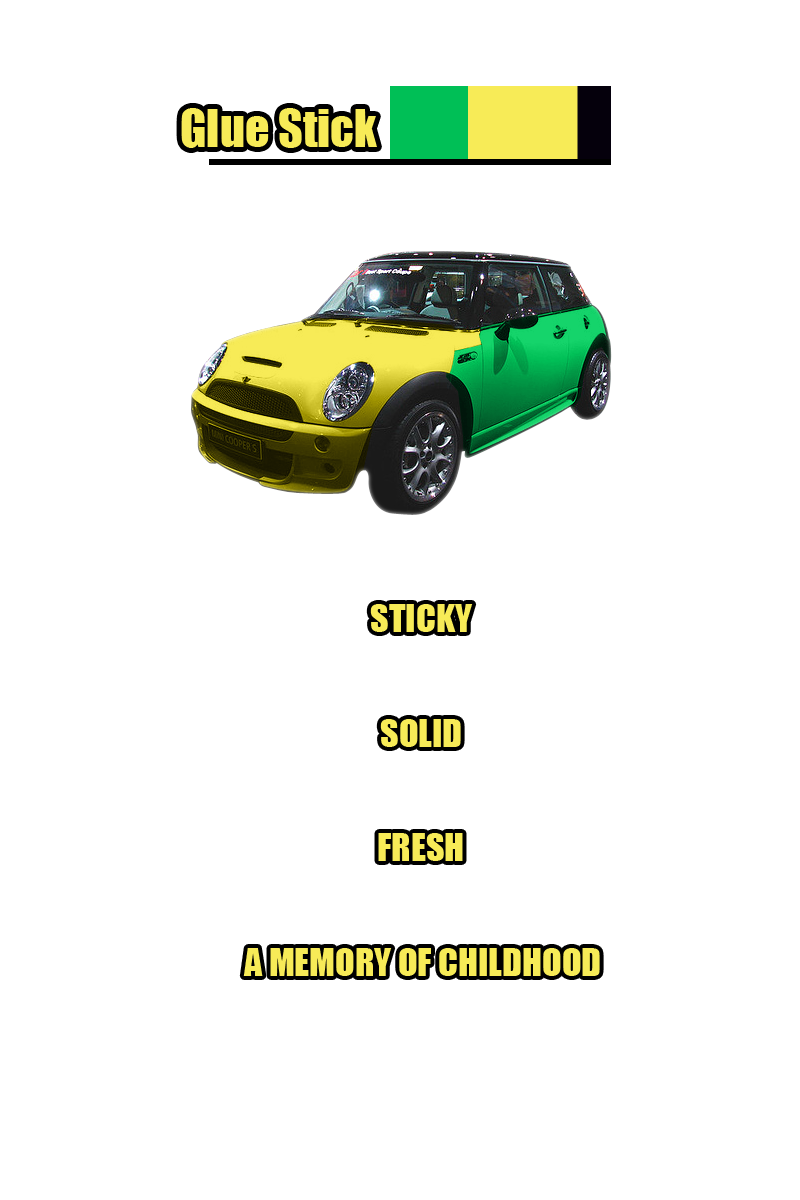
<style>
.page{position:relative;width:800px;height:1200px;background:#ffffff}
.page>*{position:absolute;margin:0}
.t1{font:48px "Impact";color:#f7eb57}
.t2{font:36px "Impact";color:#f7eb57}
</style>
<div class="page">
<p class="t1" style="left:181px;top:108px;width:196px;height:40px">Glue Stick</p>
<p class="t2" style="left:370px;top:604px;width:103px;height:28px">STICKY</p>
<p class="t2" style="left:380px;top:719px;width:81px;height:28px">SOLID</p>
<p class="t2" style="left:378px;top:833px;width:85px;height:28px">FRESH</p>
<p class="t2" style="left:243px;top:948px;width:357px;height:28px">A MEMORY OF CHILDHOOD</p>
</div>
